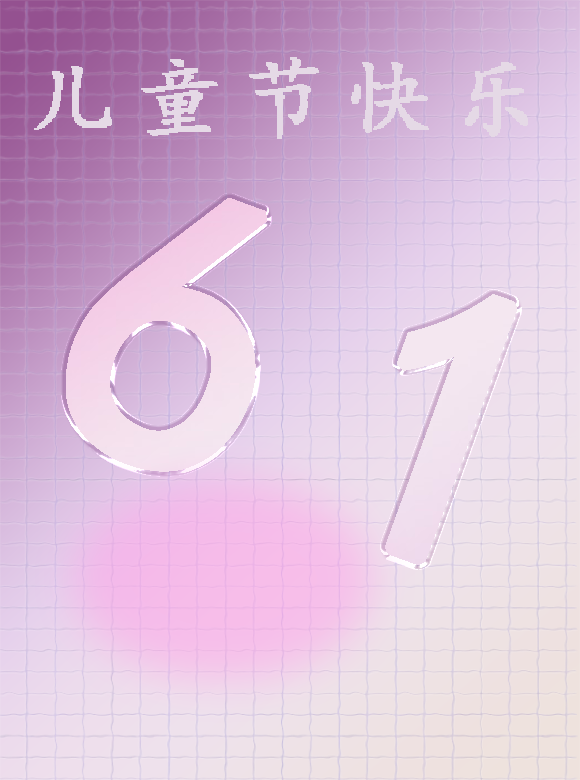
<style>
.page{position:relative;width:580px;height:780px}
.page>*{position:absolute;margin:0}
.t1{font:88px "¿¬Ìå";letter-spacing:0.2em;color:#e5d9e6;font-weight:bold}
.t2{font:400px "SimHei";letter-spacing:0.2em;color:#e2e6dd;font-weight:bold}
</style>
<div class="page">
<p class="t1" style="left:34px;top:57px;width:494px;height:82px">儿童节快乐</p>
<p class="t2" style="left:66px;top:198px;width:451px;height:367px;rotate:20deg">61</p>
</div>
